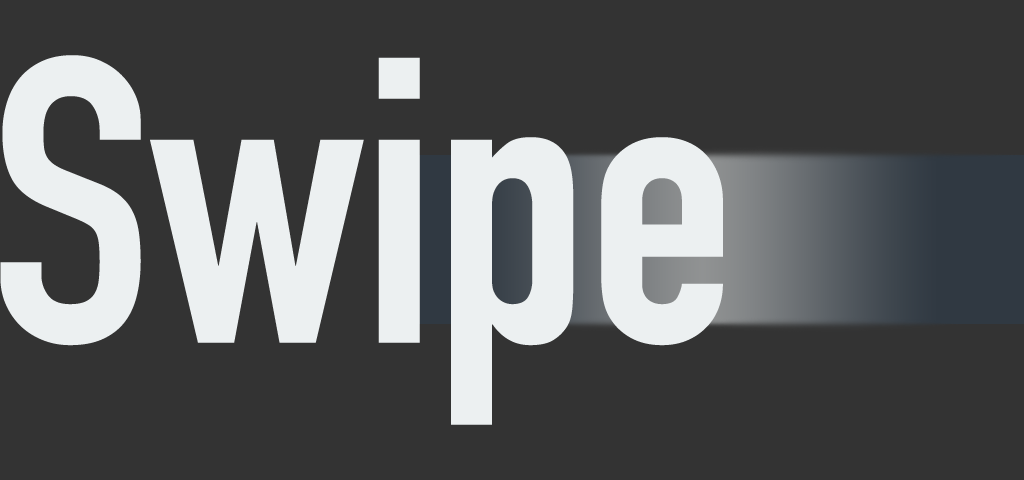
<style>
.page{position:relative;width:1024px;height:480px;background:#333333}
.page>*{position:absolute;margin:0}
.t1{font:400px "DINCondensed-Bold";letter-spacing:-0.005em;color:#ecf0f1}
</style>
<div class="page">
<p class="t1" style="left:0px;top:55px;width:723px;height:370px">Swipe</p>
</div>
